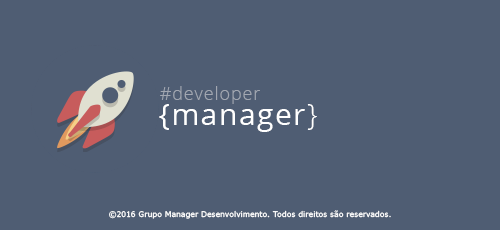
<style>
.page{position:relative;width:500px;height:230px;background:#4f5d73}
.page>*{position:absolute;margin:0}
.t1{font:18px "OpenSans-Light";letter-spacing:0.05em;color:#a2a7b1}
.t2{font:30px "OpenSans";letter-spacing:0.05em;color:#ffffff}
.t3{font:30px "OpenSans-Light";letter-spacing:0.05em;color:#ffffff}
.t4{font:8px "Tahoma";letter-spacing:0.05em;color:#ffffff}
</style>
<div class="page">
<p class="t1" style="left:160px;top:86px;width:100px;height:18px">#developer</p>
<p class="t2" style="left:159px;top:104px;width:158px;height:28px">{manager<span class="t3">}</span></p>
<p class="t4" style="left:109px;top:210px;width:282px;height:9px">©2016 Grupo Manager Desenvolvimento. Todos direitos são reservados.</p>
</div>
